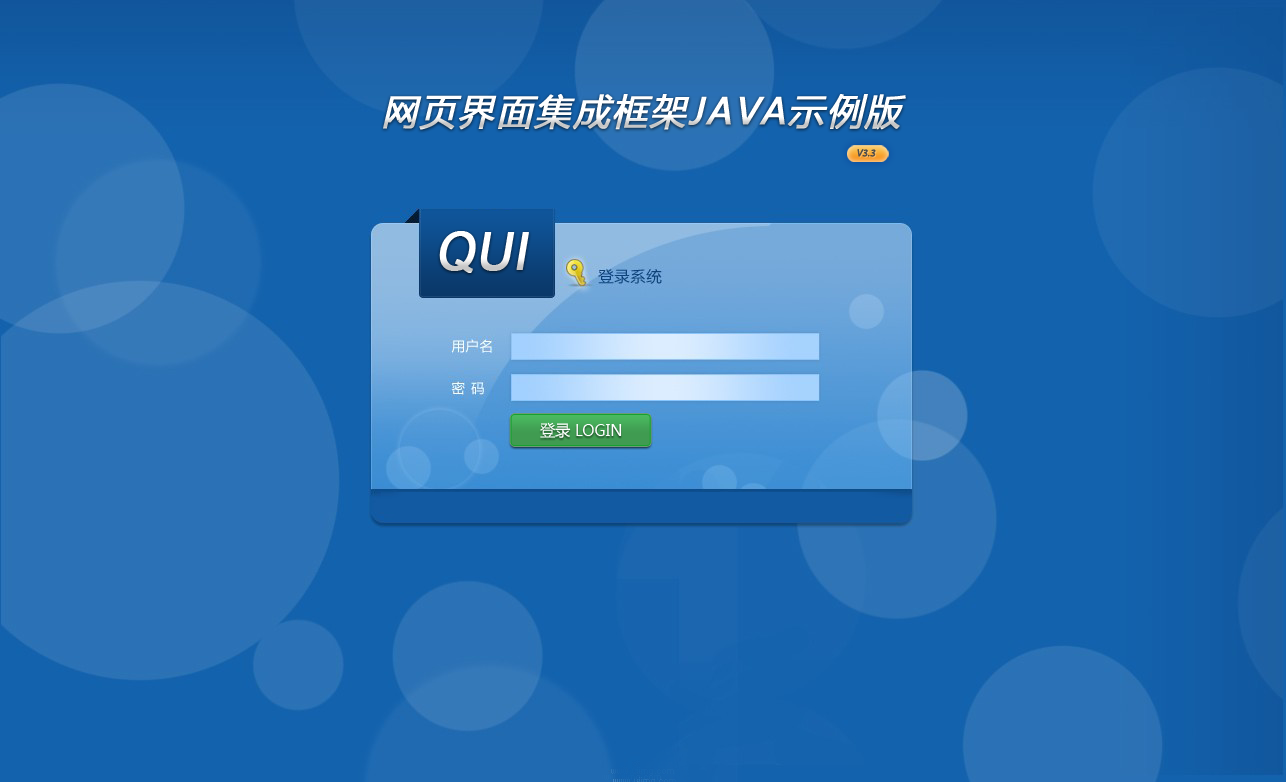
<style>
.page{position:relative;width:1286px;height:782px;background:#1362ad}
.page>*{position:absolute;margin:0}
.t1{font:36px "MicrosoftYaHei";letter-spacing:0.05em;color:#ffffff;font-weight:bold;font-style:italic}
.t2{font:10px "MyriadPro-Regular";color:#404040;text-transform:uppercase;font-weight:bold;font-style:italic}
.t3{font:52px "ArialMT";color:#ffffff;font-weight:bold;font-style:italic;scale:0.95 1}
.t4{font:16px "MicrosoftYaHei";color:#ffffff;scale:0.95 1}
</style>
<div class="page">
<p class="t1" style="left:383px;top:94px;width:523px;height:36px">网页界面集成框架JAVA示例版</p>
<p class="t2" style="left:857px;top:149px;width:19px;height:8px">v3.3</p>
<p class="t3" style="left:439px;top:231px;width:90px;height:42px">QUI</p>
<p class="t4" style="left:540px;top:422px;width:82px;height:16px">登录 LOGIN</p>
</div>
